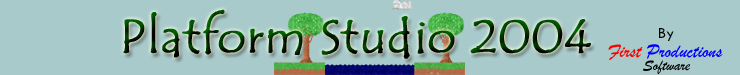
<style>
.page{position:relative;width:740px;height:75px;background:#a8caca}
.page>*{position:absolute;margin:0}
.t1{font:47.8px "TempusSansITC";font-weight:bold}
.t2{font:15.9px "TwCenMT-Medium";color:#000000}
.t3{font:19.9px "BrushScriptMT";color:#0000ff}
.t4{font:19.9px "BrushScriptMT";color:#ff0000}
.t5{font:15.9px "BrushScriptMT";color:#000000}
</style>
<div class="page">
<p class="t1" style="left:123px;top:9px;width:468px;height:50px">Platform Studio 2004</p>
<p class="t2" style="left:659px;top:28px;width:15px;height:13px">By</p>
<p class="t3" style="left:608px;top:44px;width:115px;height:16px"><span class="t4">First </span>Productions</p>
<p class="t5" style="left:643px;top:60px;width:47px;height:14px">Software</p>
</div>
